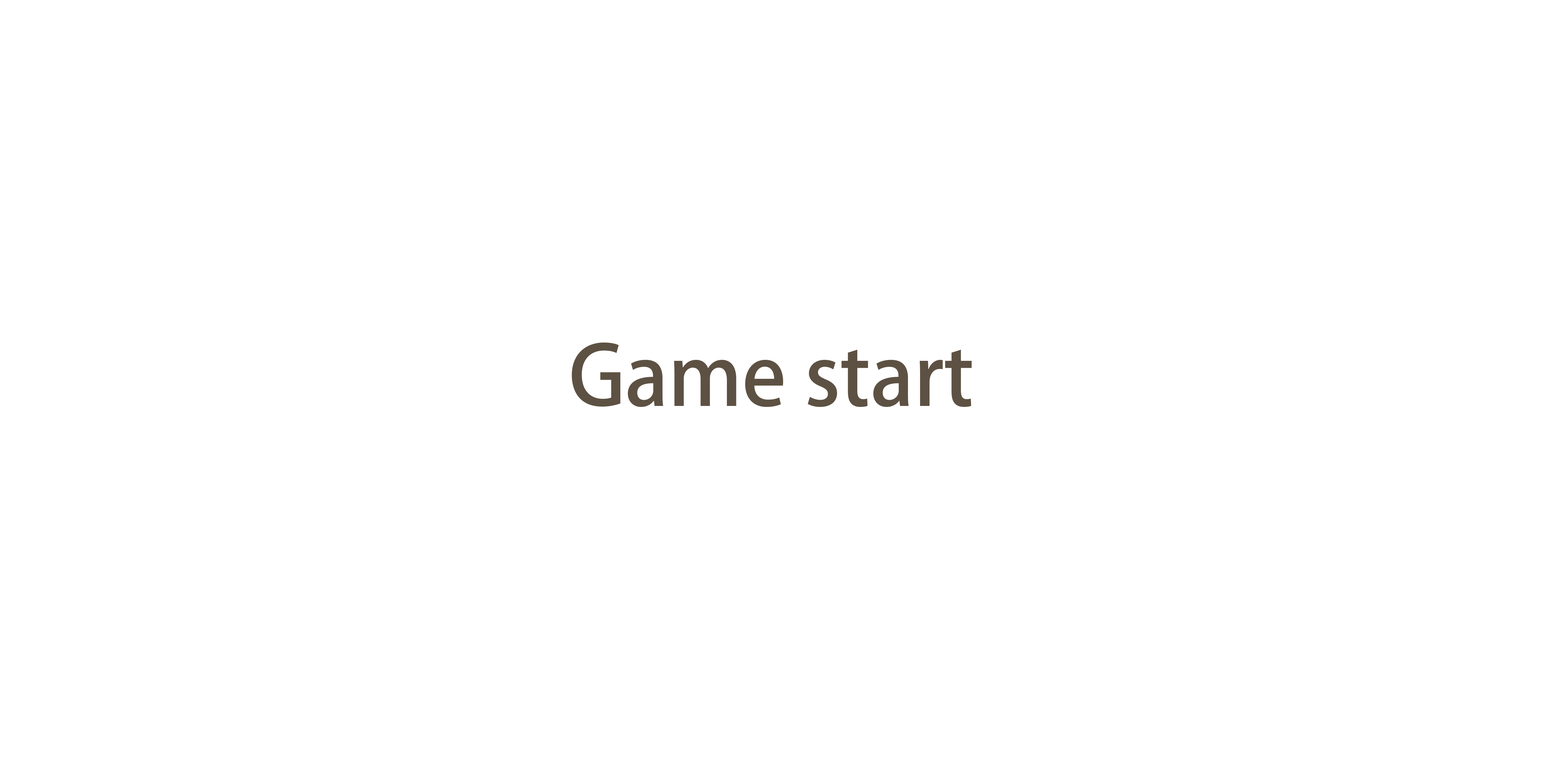
<style>
.page{position:relative;width:1544px;height:772px;background:#ffffff}
.page>*{position:absolute;margin:0}
.t1{font:81.7px "AdobeHeitiStd-Regular";color:#5d5143}
</style>
<div class="page">
<p class="t1" style="left:572px;top:343px;width:400px;height:64px">Game start</p>
</div>
